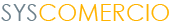
<style>
.page{position:relative;width:171px;height:24px;background:#ffffff}
.page>*{position:absolute;margin:0}
.t1{font:23.4px "CenturyGothic";color:#ffb300}
.t2{font:23.4px "CenturyGothic";color:#6d818c}
</style>
<div class="page">
<p class="t1" style="left:1px;top:4px;width:168px;height:17px"><span class="t2">SYS</span>COMERCIO</p>
</div>
